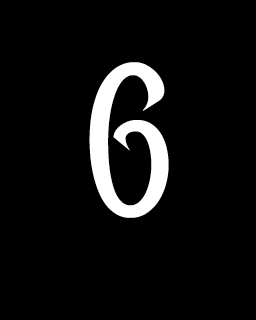
<style>
.page{position:relative;width:256px;height:320px;background:#000000}
.page>*{position:absolute;margin:0}
.t1{font:238.9px "Smythe";color:#ffffff}
</style>
<div class="page">
<p class="t1" style="left:89px;top:62px;width:80px;height:156px">6</p>
</div>
